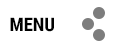
<style>
.page{position:relative;width:118px;height:48px;background:#ffffff}
.page>*{position:absolute;margin:0}
.t1{font:18.7px "RobotoCondensed-Bold";color:#000000}
</style>
<div class="page">
<p class="t1" style="left:10px;top:17px;width:44px;height:15px">MENU</p>
</div>
